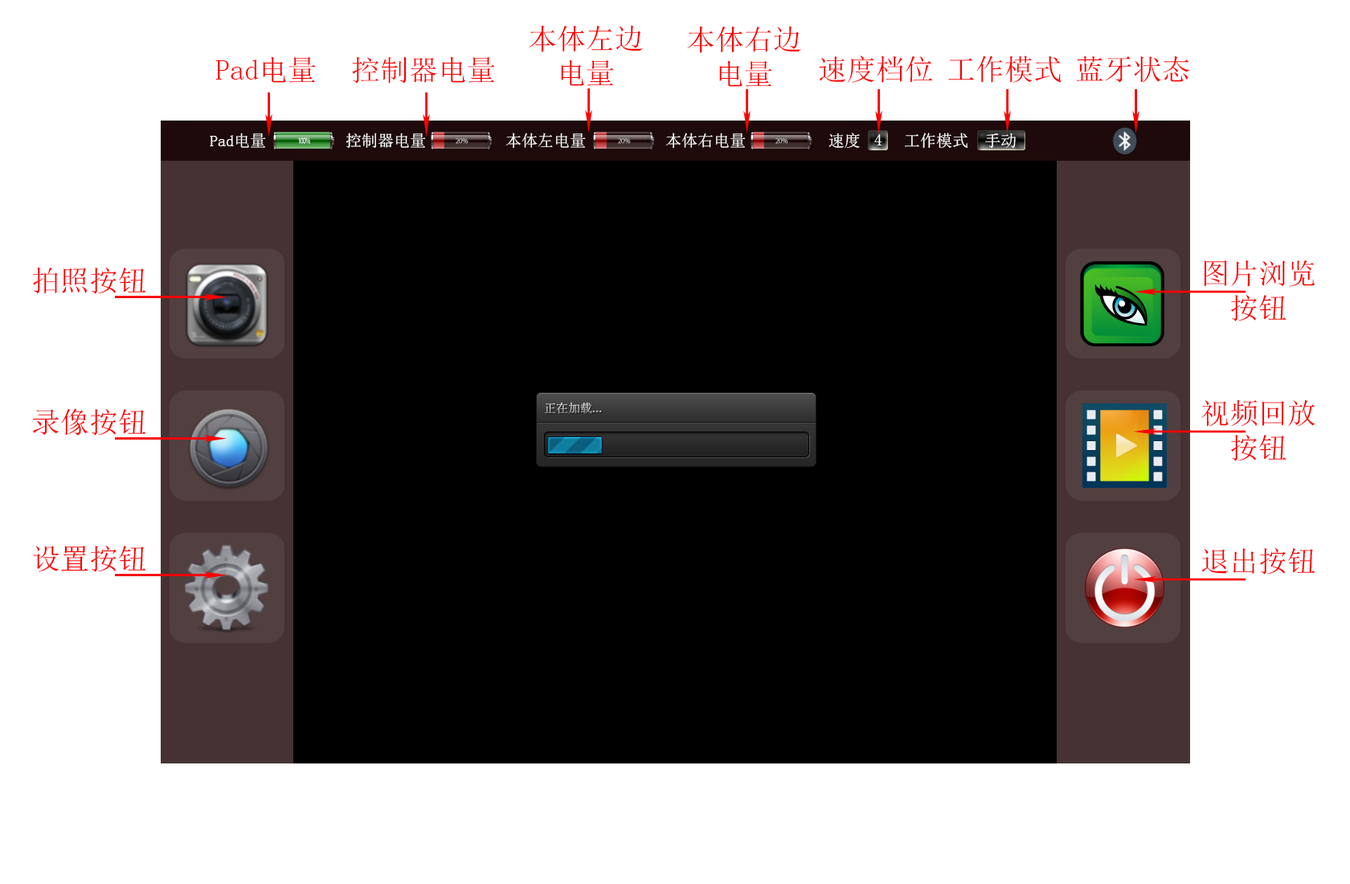
<style>
.page{position:relative;width:1350px;height:884px;background:#ffffff}
.page>*{position:absolute;margin:0}
.t1{font:28.9px "SimSun";color:#fa0000}
</style>
<div class="page">
<p class="t1" style="left:529px;top:25px;width:114px;height:61px;text-align:center">本体左边<br>电量</p>
<p class="t1" style="left:687px;top:26px;width:114px;height:61px;text-align:center">本体右边<br>电量</p>
<p class="t1" style="left:215px;top:56px;width:101px;height:27px">Pad电量</p>
<p class="t1" style="left:352px;top:56px;width:143px;height:28px">控制器电量</p>
<p class="t1" style="left:819px;top:55px;width:114px;height:28px">速度档位</p>
<p class="t1" style="left:948px;top:55px;width:113px;height:28px">工作模式</p>
<p class="t1" style="left:1076px;top:55px;width:114px;height:28px">蓝牙状态</p>
<p class="t1" style="left:32px;top:267px;width:114px;height:27px">拍照按钮</p>
<p class="t1" style="left:1203px;top:259px;width:112px;height:62px;text-align:center">图片浏览<br>按钮</p>
<p class="t1" style="left:1201px;top:399px;width:114px;height:62px;text-align:center">视频回放<br>按钮</p>
<p class="t1" style="left:32px;top:408px;width:114px;height:27px">录像按钮</p>
<p class="t1" style="left:33px;top:545px;width:113px;height:27px">设置按钮</p>
<p class="t1" style="left:1201px;top:547px;width:114px;height:27px">退出按钮</p>
</div>
